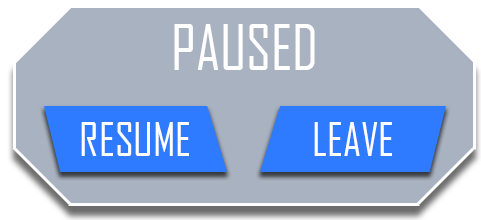
<style>
.page{position:relative;width:481px;height:220px;background:#a9b2c1}
.page>*{position:absolute;margin:0}
.t1{font:60px "AgencyFB-Reg";color:#ffffff}
.t2{font:44.6px "AgencyFB-Reg";color:#ffffff}
</style>
<div class="page">
<p class="t1" style="left:174px;top:24px;width:141px;height:46px">PAUSED</p>
<p class="t2" style="left:81px;top:122px;width:108px;height:34px">RESUME</p>
<p class="t2" style="left:314px;top:122px;width:78px;height:34px">LEAVE</p>
</div>
